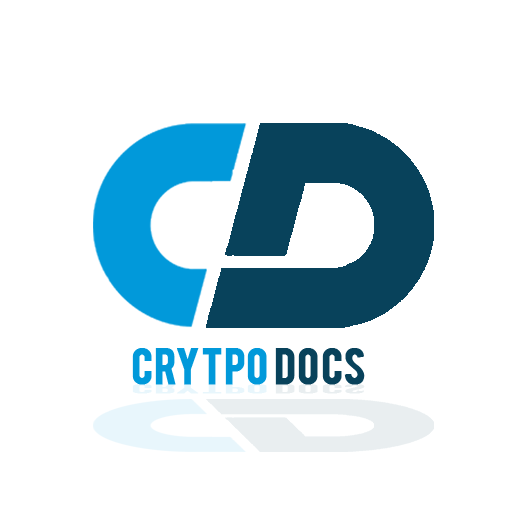
<style>
.page{position:relative;width:512px;height:512px;background:#ffffff}
.page>*{position:absolute;margin:0}
.t1{font:40px "Bebas";color:#0199da;font-weight:bold;scale:1.04 1}
.t2{font:40px "Bebas";color:#08425b;font-weight:bold;scale:1.04 1}
</style>
<div class="page">
<p class="t1" style="left:132px;top:348px;width:233px;height:37px">CRYTPO <span class="t2">DOCS</span></p>
</div>
